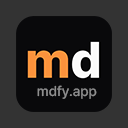
<style>
.page{position:relative;width:128px;height:128px;background:#333333}
.page>*{position:absolute;margin:0}
.t1{font:14px "Pretendard-Medium";color:#8f8f8f}
</style>
<div class="page">
<p class="t1" style="left:37px;top:85px;width:60px;height:14px">mdfy.app</p>
</div>
